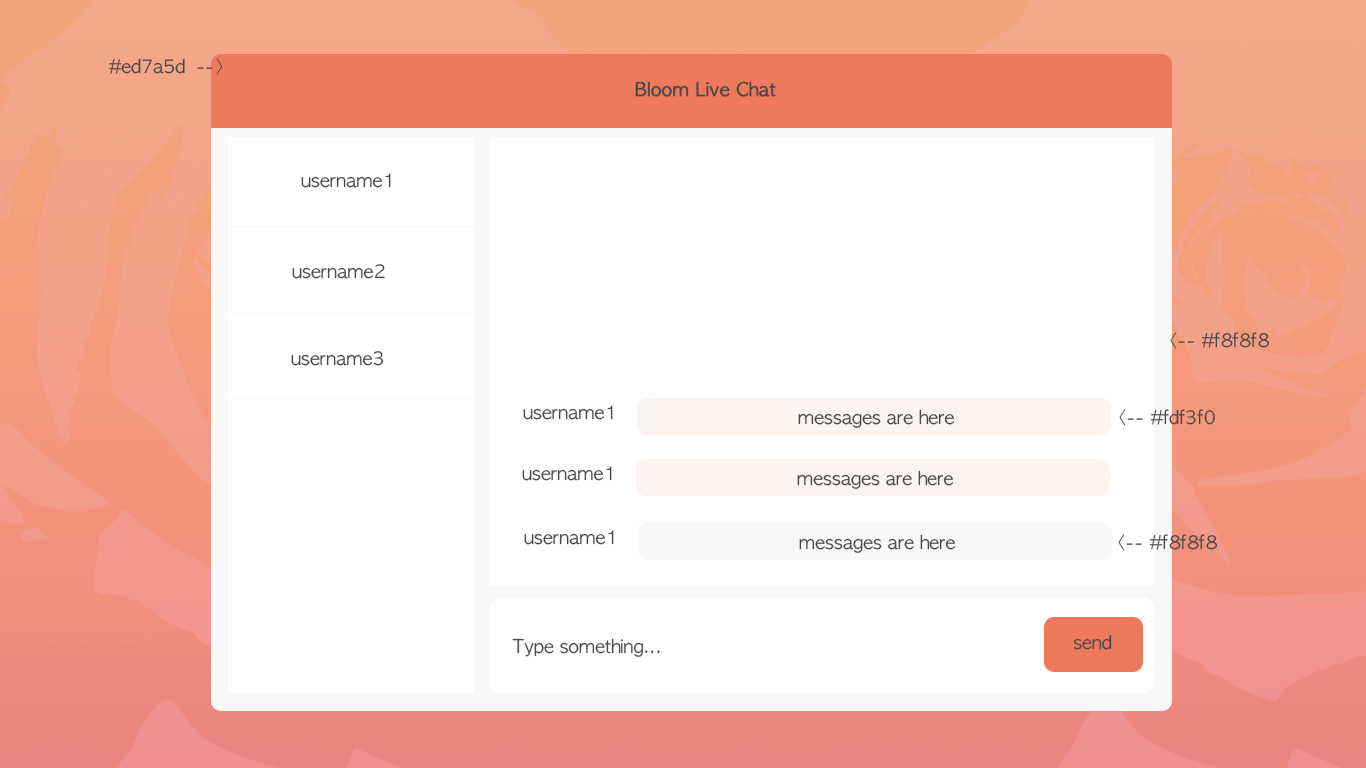
<style>
.page{position:relative;width:1366px;height:768px;background:#ffffff}
.page>*{position:absolute;margin:0}
.t1{font:18px "AppleGothic";color:#4c4949}
.t2{font:18px "AppleGothic";color:#4c4949;font-weight:bold}
</style>
<div class="page">
<p class="t1" style="left:109px;top:58px;width:114px;height:17px">#ed7a5d  --&gt;</p>
<p class="t2" style="left:635px;top:81px;width:141px;height:16px">Bloom Live Chat</p>
<p class="t1" style="left:301px;top:173px;width:90px;height:15px">username1</p>
<p class="t1" style="left:292px;top:264px;width:93px;height:15px">username2</p>
<p class="t1" style="left:1170px;top:332px;width:100px;height:17px">&lt;-- #f8f8f8</p>
<p class="t1" style="left:291px;top:351px;width:93px;height:15px">username3</p>
<p class="t1" style="left:523px;top:405px;width:90px;height:15px">username1</p>
<p class="t1" style="left:798px;top:409px;width:156px;height:19px">messages are here</p>
<p class="t1" style="left:1119px;top:409px;width:96px;height:17px">&lt;-- #fdf3f0</p>
<p class="t1" style="left:522px;top:466px;width:90px;height:15px">username1</p>
<p class="t1" style="left:797px;top:470px;width:156px;height:19px">messages are here</p>
<p class="t1" style="left:524px;top:530px;width:90px;height:15px">username1</p>
<p class="t1" style="left:799px;top:534px;width:156px;height:19px">messages are here</p>
<p class="t1" style="left:1118px;top:534px;width:100px;height:17px">&lt;-- #f8f8f8</p>
<p class="t1" style="left:512px;top:638px;width:148px;height:19px">Type something...</p>
<p class="t1" style="left:1073px;top:634px;width:39px;height:16px">send</p>
</div>
